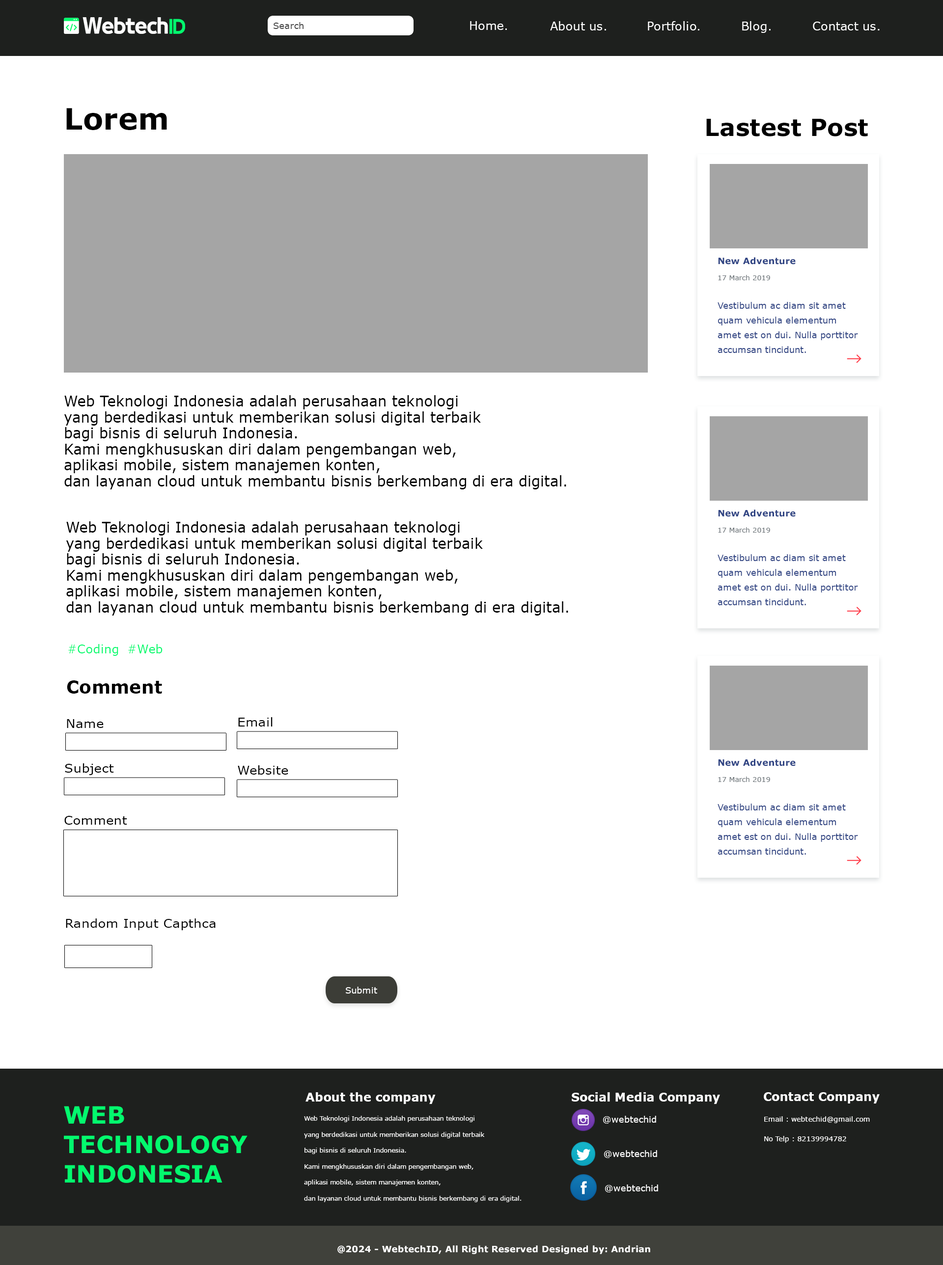
<style>
.page{position:relative;width:943px;height:1265px;background:#ffffff}
.page>*{position:absolute;margin:0}
.t1{font:8.8px "Verdana";letter-spacing:0.01em;color:#464646}
.t2{font:11.8px "Verdana";letter-spacing:0.01em;color:#ffffff}
.t3{font:29.5px "Verdana-Bold";letter-spacing:0.01em;color:#000000}
.t4{font:23.6px "Verdana-Bold";letter-spacing:0.01em;color:#000000}
.t5{font:8.8px "Verdana-Bold";letter-spacing:0.01em;color:#314584}
.t6{font:6.9px "Verdana";letter-spacing:0.01em;color:#6e757a}
.t7{font:8.8px/14.7px "Verdana";letter-spacing:0.01em;color:#314584}
.t8{font:14.7px/16px "Verdana";letter-spacing:0.01em;color:#000000;scale:0.96 1}
.t9{font:11.8px "Verdana";letter-spacing:0.01em;color:#03fa6e}
.t10{font:17.7px "Verdana-Bold";letter-spacing:0.01em;color:#000000}
.t11{font:11.7px "Verdana";letter-spacing:0.01em;color:#000000;scale:1.1 1}
.t12{font:8.8px "Verdana";letter-spacing:0.01em;color:#ffffff}
.t13{font:11.8px "Verdana-Bold";letter-spacing:0.01em;color:#ffffff}
.t14{font:23.8px/29.5px "Verdana-Bold";letter-spacing:0.01em;color:#03fa6e}
.t15{font:6.4px/16px "Verdana";letter-spacing:0.01em;color:#ffffff;scale:0.96 1}
.t16{font:6.9px "Verdana";letter-spacing:0.01em;color:#ffffff}
.t17{font:8.8px "Verdana-Bold";letter-spacing:0.01em;color:#ffffff}
</style>
<div class="page">
<p class="t1" style="left:273px;top:22px;width:30px;height:7px">Search</p>
<p class="t2" style="left:470px;top:21px;width:37px;height:9px">Home.</p>
<p class="t2" style="left:550px;top:21px;width:56px;height:9px">About us.</p>
<p class="t2" style="left:648px;top:21px;width:51px;height:9px">Portfolio.</p>
<p class="t2" style="left:742px;top:21px;width:28px;height:12px">Blog.</p>
<p class="t2" style="left:812px;top:22px;width:67px;height:8px">Contact us.</p>
<p class="t3" style="left:66px;top:108px;width:101px;height:22px">Lorem</p>
<p class="t4" style="left:706px;top:119px;width:161px;height:17px">Lastest Post</p>
<p class="t5" style="left:718px;top:257px;width:77px;height:8px">New Adventure</p>
<p class="t6" style="left:718px;top:275px;width:52px;height:5px">17 March 2019</p>
<p class="t7" style="left:717px;top:302px;width:141px;height:51px">Vestibulum ac diam sit amet quam vehicula elementum amet est on dui. Nulla porttitor accumsan tincidunt.</p>
<p class="t8" style="left:64px;top:395px;width:502px;height:94px">Web Teknologi Indonesia adalah perusahaan teknologi<br>yang berdedikasi untuk memberikan solusi digital terbaik <br>bagi bisnis di seluruh Indonesia. <br>Kami mengkhususkan diri dalam pengembangan web, <br>aplikasi mobile, sistem manajemen konten, <br>dan layanan cloud untuk membantu bisnis berkembang di era digital.</p>
<p class="t5" style="left:718px;top:510px;width:77px;height:7px">New Adventure</p>
<p class="t8" style="left:66px;top:521px;width:502px;height:95px">Web Teknologi Indonesia adalah perusahaan teknologi<br>yang berdedikasi untuk memberikan solusi digital terbaik <br>bagi bisnis di seluruh Indonesia. <br>Kami mengkhususkan diri dalam pengembangan web, <br>aplikasi mobile, sistem manajemen konten, <br>dan layanan cloud untuk membantu bisnis berkembang di era digital.</p>
<p class="t6" style="left:718px;top:527px;width:52px;height:6px">17 March 2019</p>
<p class="t7" style="left:717px;top:554px;width:141px;height:51px">Vestibulum ac diam sit amet quam vehicula elementum amet est on dui. Nulla porttitor accumsan tincidunt.</p>
<p class="t9" style="left:68px;top:644px;width:50px;height:12px">#Coding</p>
<p class="t9" style="left:128px;top:644px;width:34px;height:9px">#Web</p>
<p class="t10" style="left:67px;top:680px;width:95px;height:14px">Comment</p>
<p class="t11" style="left:67px;top:719px;width:37px;height:9px">Name</p>
<p class="t11" style="left:238px;top:717px;width:34px;height:10px">Email</p>
<p class="t5" style="left:718px;top:759px;width:77px;height:7px">New Adventure</p>
<p class="t11" style="left:65px;top:763px;width:49px;height:12px">Subject</p>
<p class="t11" style="left:238px;top:765px;width:50px;height:10px">Website</p>
<p class="t6" style="left:718px;top:777px;width:52px;height:5px">17 March 2019</p>
<p class="t7" style="left:717px;top:804px;width:141px;height:51px">Vestibulum ac diam sit amet quam vehicula elementum amet est on dui. Nulla porttitor accumsan tincidunt.</p>
<p class="t11" style="left:64px;top:816px;width:63px;height:9px">Comment</p>
<p class="t11" style="left:66px;top:919px;width:150px;height:11px">Random Input Capthca</p>
<p class="t12" style="left:346px;top:987px;width:31px;height:7px">Submit</p>
<p class="t13" style="left:305px;top:1092px;width:130px;height:12px">About the company</p>
<p class="t13" style="left:571px;top:1092px;width:149px;height:12px">Social Media Company</p>
<p class="t13" style="left:763px;top:1092px;width:116px;height:12px">Contact Company</p>
<p class="t14" style="left:64px;top:1106px;width:183px;height:77px">WEB <br>TECHNOLOGY <br>INDONESIA</p>
<p class="t15" style="left:304px;top:1116px;width:217px;height:86px">Web Teknologi Indonesia adalah perusahaan teknologi<br>yang berdedikasi untuk memberikan solusi digital terbaik <br>bagi bisnis di seluruh Indonesia. <br>Kami mengkhususkan diri dalam pengembangan web, <br>aplikasi mobile, sistem manajemen konten, <br>dan layanan cloud untuk membantu bisnis berkembang di era digital.</p>
<p class="t12" style="left:602px;top:1116px;width:54px;height:8px">@webtechid</p>
<p class="t16" style="left:764px;top:1116px;width:105px;height:7px">Email : webtechid@gmail.com</p>
<p class="t16" style="left:764px;top:1136px;width:82px;height:7px">No Telp : 82139994782</p>
<p class="t12" style="left:603px;top:1150px;width:54px;height:8px">@webtechid</p>
<p class="t12" style="left:604px;top:1185px;width:54px;height:7px">@webtechid</p>
<p class="t17" style="left:337px;top:1245px;width:313px;height:9px">@2024 - WebtechID, All Right Reserved Designed by: Andrian</p>
</div>
